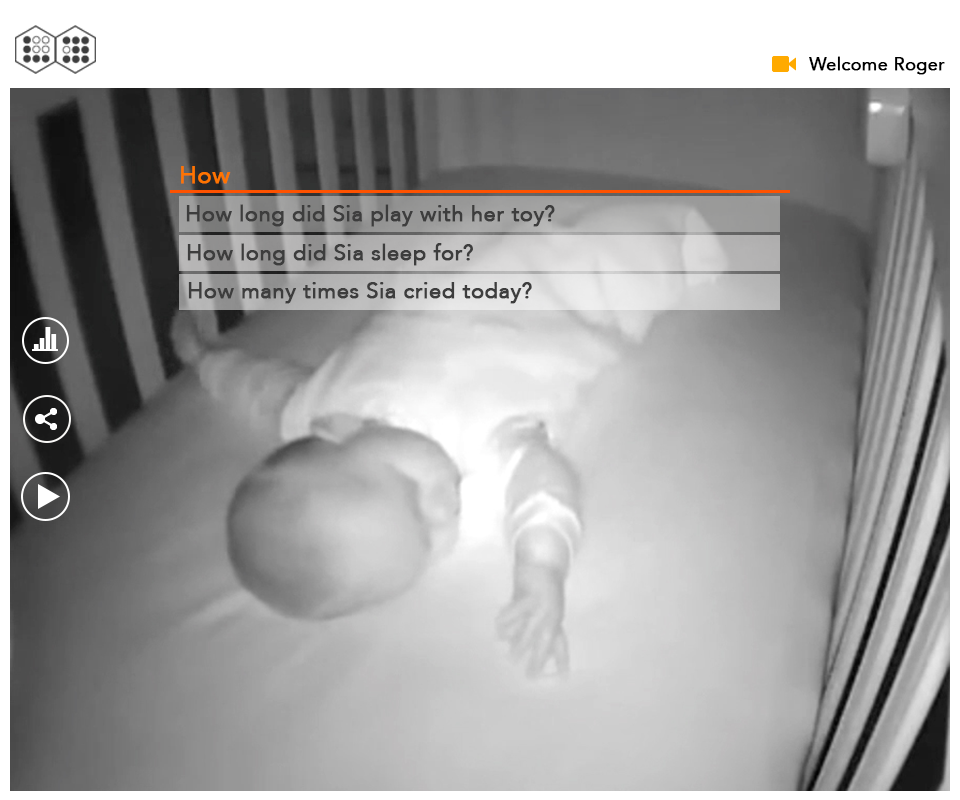
<style>
.page{position:relative;width:960px;height:800px}
.page>*{position:absolute;margin:0}
.t1{font:18px "Avenir-Roman";color:#000000;font-weight:bold}
.t2{font:24px "Avenir-Roman";color:#ff7400;font-weight:bold}
.t3{font:22px "Avenir-Roman";color:#3d3d3d;font-weight:bold}
</style>
<div class="page">
<p class="t1" style="left:809px;top:56px;width:136px;height:19px">Welcome Roger</p>
<p class="t2" style="left:181px;top:166px;width:50px;height:18px">How</p>
<p class="t3" style="left:186px;top:204px;width:369px;height:23px">How long did Sia play with her toy?</p>
<p class="t3" style="left:187px;top:243px;width:286px;height:23px">How long did Sia sleep for?</p>
<p class="t3" style="left:188px;top:282px;width:344px;height:22px">How many times Sia cried today?</p>
</div>
